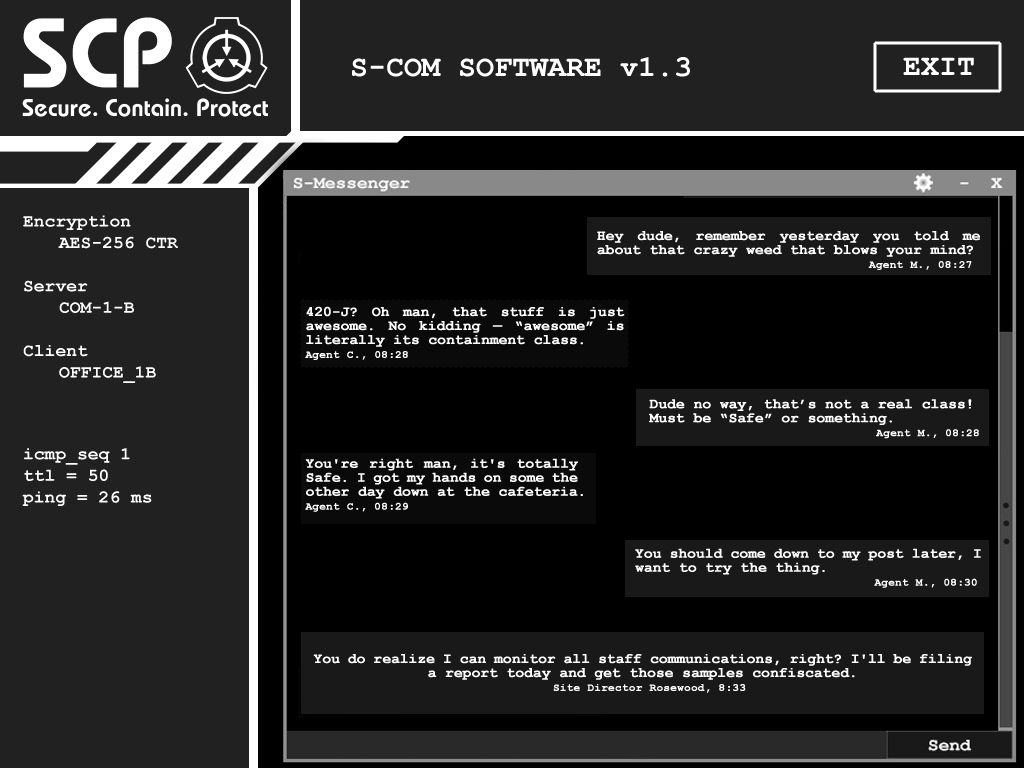
<style>
.page{position:relative;width:1024px;height:768px;background:#000000}
.page>*{position:absolute;margin:0}
.t1{font:14px/14px "CourierNewPS-BoldMT";color:#ffffff;font-weight:bold}
.t2{font:11px/14px "CourierNewPS-BoldMT";color:#ffffff;font-weight:bold}
</style>
<div class="page">
<p class="t1" style="left:597px;top:231px;width:383px;height:39px;text-align:justify">Hey dude, remember yesterday you told me about that crazy weed that blows your mind? <br>                               <span class="t2">Agent M., 08:27</span></p>
<p class="t1" style="left:305px;top:306px;width:320px;height:54px;text-align:justify">420-J? Oh man, that stuff is just awesome. No kidding — “awesome” is literally its containment class.<br><span class="t2">Agent C., 08:28</span></p>
<p class="t1" style="left:649px;top:399px;width:330px;height:40px">Dude no way, that’s not a real class! Must be “Safe” or something.<br>                           <span class="t2">Agent M., 08:28</span></p>
<p class="t1" style="left:305px;top:458px;width:278px;height:54px;text-align:justify">You're right man, it's totally Safe. I got my hands on some the other day down at the cafeteria.<br><span class="t2">Agent C., 08:29</span></p>
<p class="t1" style="left:635px;top:548px;width:346px;height:40px;text-align:justify">You should come down to my post later, I want to try the thing.<br>                               <span class="t2">Agent M., 08:30</span></p>
<p class="t1" style="left:313px;top:654px;width:659px;height:39px;text-align:justify">You do realize I can monitor all staff communications, right? I'll be filing a report today and get those samples confiscated.<br><span class="t2">  Site Director Rosewood, 8:33</span></p>
</div>
